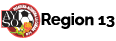
<style>
.page{position:relative;width:116px;height:41px;background:#ffffff}
.page>*{position:absolute;margin:0}
.t1{font:16px "RalewayRoman-Bold";color:#000000}
</style>
<div class="page">
<p class="t1" style="left:41px;top:13px;width:74px;height:16px">Region 13</p>
</div>
